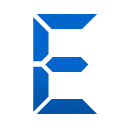
<style>
.page{position:relative;width:128px;height:128px;background:#ffffff}
.page>*{position:absolute;margin:0}
.t1{font:143px "QuartzMS";color:#0062c7}
</style>
<div class="page">
<p class="t1" style="left:33px;top:14px;width:64px;height:100px">E</p>
</div>
